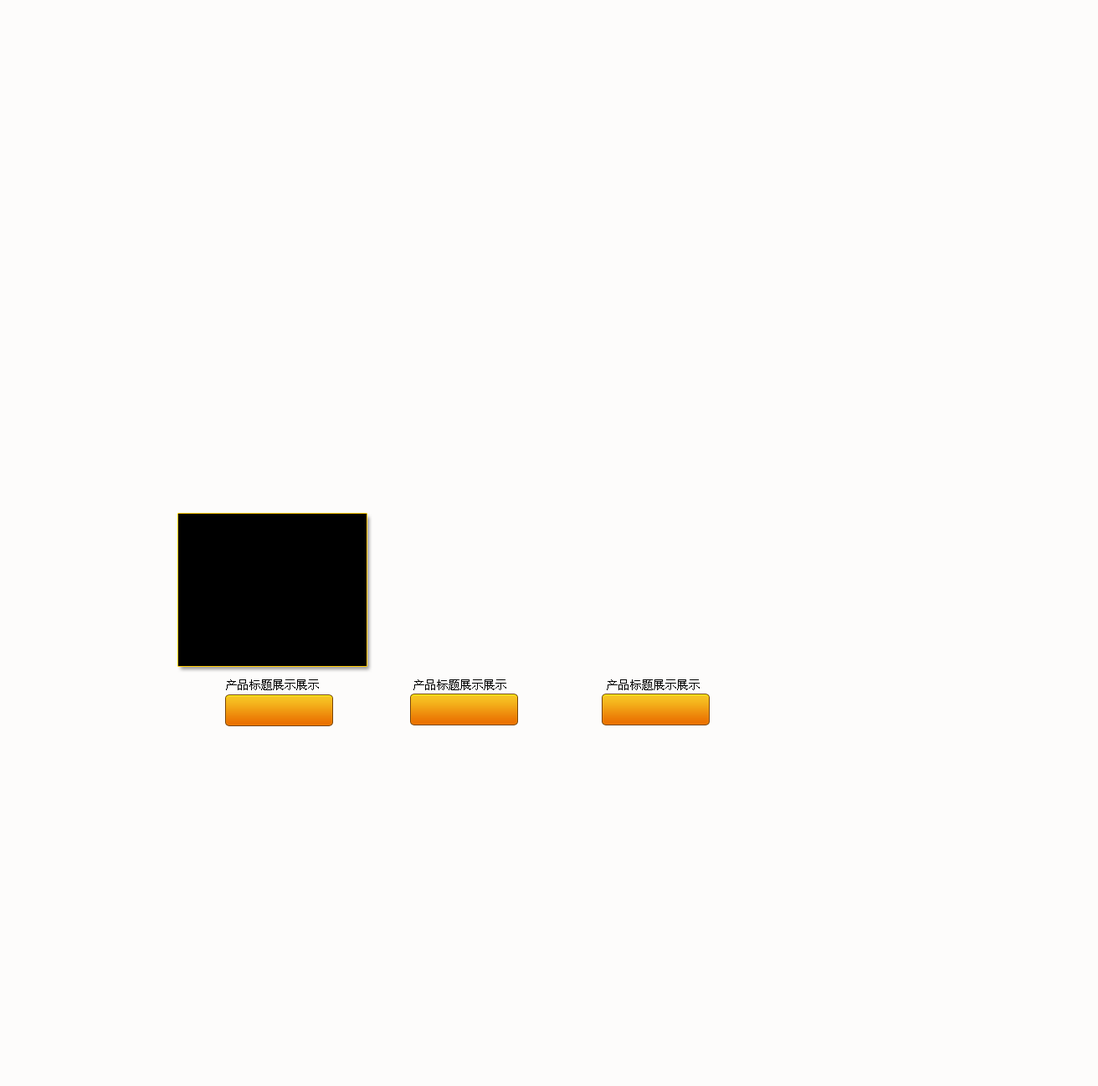
<style>
.page{position:relative;width:1098px;height:1086px;background:#fdfcfb}
.page>*{position:absolute;margin:0}
.t1{font:11.7px "SimSun";color:#000000}
</style>
<div class="page">
<p class="t1" style="left:226px;top:679px;width:474px;height:11px">产品标题展示展示                产品标题展示展示                 产品标题展示展示</p>
</div>
